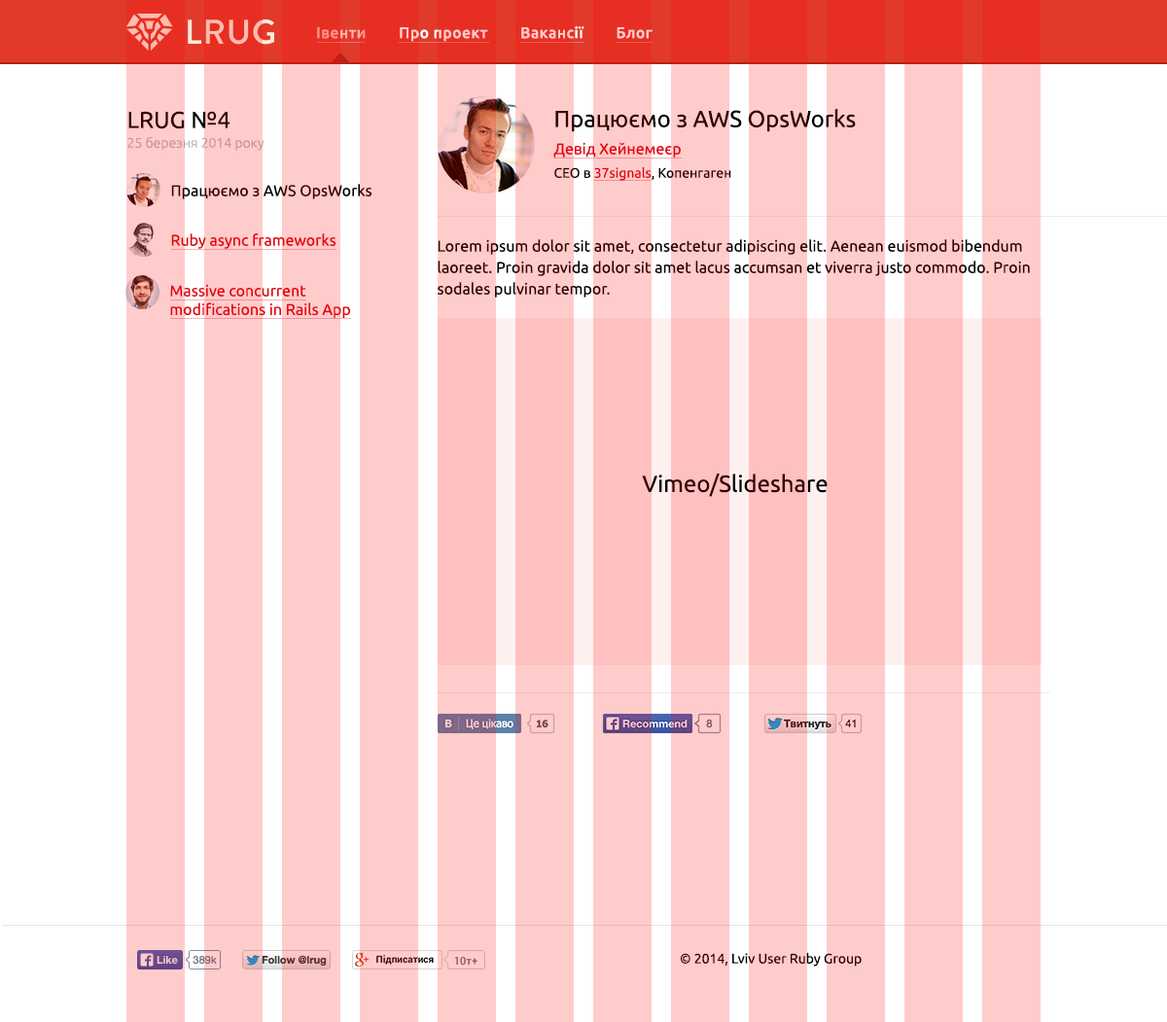
<style>
.page{position:relative;width:1167px;height:1022px;background:#ffcccc}
.page>*{position:absolute;margin:0}
.t1{font:15.6px "Ubuntu-Medium";letter-spacing:0.034em}
.t2{font:23.3px "Ubuntu";color:#330000}
.t3{font:13.6px "Ubuntu-Light";color:#c69393}
.t4{font:15.6px "Ubuntu";color:#e3000e}
.t5{font:13.6px "Ubuntu"}
.t6{font:15.6px "Ubuntu"}
.t7{font:15.6px/21.4px "Ubuntu";color:#330000}
.t8{font:23.3px "Ubuntu"}
.t9{font:13.6px "Ubuntu";color:#330000}
</style>
<div class="page">
<p class="t1" style="left:317px;top:26px;width:335px;height:16px">Івенти        Про проект        Вакансії        Блог</p>
<p class="t2" style="left:128px;top:111px;width:101px;height:18px">LRUG №4</p>
<p class="t2" style="left:555px;top:109px;width:301px;height:23px">Працюємо з AWS OpsWorks</p>
<p class="t3" style="left:127px;top:136px;width:137px;height:15px">25 березня 2014 року</p>
<p class="t4" style="left:553px;top:142px;width:128px;height:16px">Девід Хейнемеєр</p>
<p class="t5" style="left:554px;top:166px;width:177px;height:15px">CEO в 37signals, Копенгаген</p>
<p class="t6" style="left:171px;top:184px;width:201px;height:15px">Працюємо з AWS OpsWorks</p>
<p class="t4" style="left:171px;top:233px;width:165px;height:16px">Ruby async frameworks</p>
<p class="t7" style="left:438px;top:239px;width:592px;height:59px">Lorem ipsum dolor sit amet, consectetur adipiscing elit. Aenean euismod bibendum laoreet. Proin gravida dolor sit amet lacus accumsan et viverra justo commodo. Proin sodales pulvinar tempor.</p>
<p class="t4" style="left:170px;top:284px;width:180px;height:34px">Massive concurrent <br>modifications in Rails App</p>
<p class="t8" style="left:642px;top:474px;width:185px;height:23px">Vimeo/Slideshare</p>
<p class="t9" style="left:680px;top:952px;width:182px;height:15px">© 2014, Lviv User Ruby Group</p>
</div>
